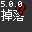
<style>
.page{position:relative;width:32px;height:32px;background:#333333}
.page>*{position:absolute;margin:0}
.t1{font:9px "Consolas";letter-spacing:-0.038em;color:#ffffff}
.t2{font:12px "SimSun";letter-spacing:-0.038em;color:#ffffff}
</style>
<div class="page">
<p class="t1" style="left:1px;top:1px;width:21px;height:6px">5.0.0</p>
<p class="t2" style="left:1px;top:9px;width:23px;height:12px">掉落</p>
</div>
